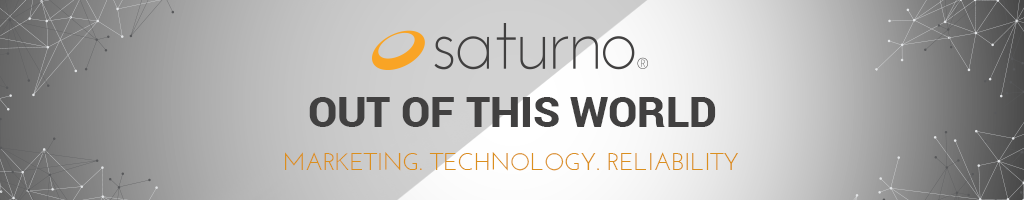
<style>
.page{position:relative;width:1024px;height:200px}
.page>*{position:absolute;margin:0}
.t1{font:42.4px "Roboto-Black";color:#414040;text-transform:uppercase}
.t2{font:23.8px "JosefinSans";color:#db8f1d}
</style>
<div class="page">
<p class="t1" style="left:309px;top:97px;width:407px;height:30px">OUT OF THIS WORLD</p>
<p class="t2" style="left:285px;top:152px;width:453px;height:19px">MARKETING. TECHNOLOGY. RELIABILITY</p>
</div>
